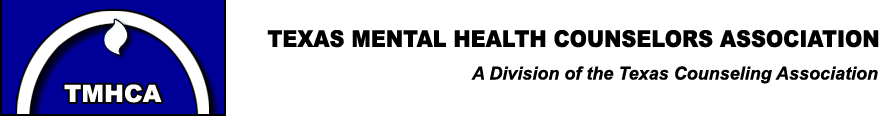
<style>
.page{position:relative;width:895px;height:116px;background:#ffffff}
.page>*{position:absolute;margin:0}
.t1{font:23px "Arial-Black";color:#000000;scale:0.9 1}
.t2{font:18px "Arial-BoldItalicMT";color:#000000}
.t3{font:24px "Arial-Black";color:#ffffff}
</style>
<div class="page">
<p class="t1" style="left:267px;top:30px;width:612px;height:18px">TEXAS MENTAL HEALTH COUNSELORS ASSOCIATION</p>
<p class="t2" style="left:471px;top:66px;width:407px;height:18px">A Division of the Texas Counseling Association</p>
<p class="t3" style="left:64px;top:84px;width:98px;height:19px">TMHCA</p>
</div>
